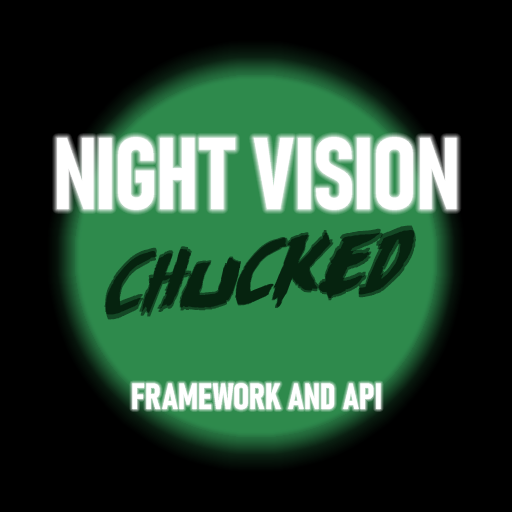
<style>
.page{position:relative;width:512px;height:512px;background:#000000}
.page>*{position:absolute;margin:0}
.t1{font:100px "Bahnschrift-BoldCondensed";color:#ffffff;font-weight:bold}
.t2{font:74.2px "MonstersAttack";color:#06230f;font-weight:bold}
.t3{font:36px "Bahnschrift-BoldCondensed";color:#ffffff;font-weight:bold}
</style>
<div class="page">
<p class="t1" style="left:57px;top:137px;width:400px;height:73px">NIGHT VISION</p>
<p class="t2" style="left:104px;top:230px;width:312px;height:85px;rotate:-4deg">CHUCKED</p>
<p class="t2" style="left:105px;top:225px;width:310px;height:95px;rotate:-6deg">CHUCKED</p>
<p class="t3" style="left:132px;top:383px;width:249px;height:27px">FRAMEWORK AND API</p>
</div>
